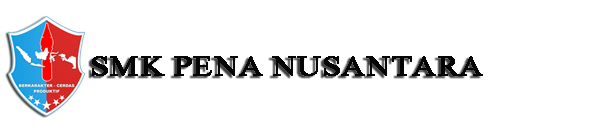
<style>
.page{position:relative;width:600px;height:137px;background:#ffffff}
.page>*{position:absolute;margin:0}
.t1{font:36px "Aparajita";color:#060606;font-weight:bold;scale:1.13 1}
</style>
<div class="page">
<p class="t1" style="left:92px;top:56px;width:391px;height:20px">SMK PENA NUSANTARA</p>
</div>
